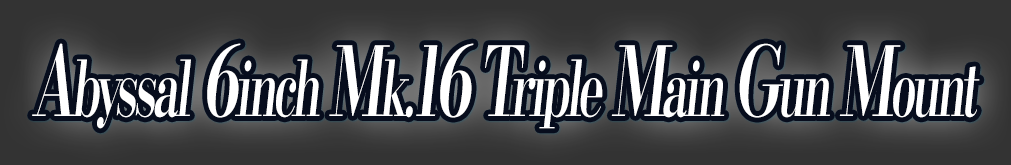
<style>
.page{position:relative;width:1011px;height:165px}
.page>*{position:absolute;margin:0}
.t1{font:76.8px "KochoStd-Heavy";letter-spacing:-0.08em;color:#ffffff;font-style:italic;scale:0.61 1}
.t2{font:96px "KochoStd-Heavy";letter-spacing:-0.08em;color:#ffffff;font-style:italic;scale:0.61 1}
</style>
<div class="page">
<p class="t1" style="left:32px;top:43px;width:948px;height:86px"><span class="t2">A</span>byssal<span class="t2"> 6</span>inch <span class="t2">M</span>k.<span class="t2">16 T</span>riple <span class="t2">M</span>ain <span class="t2">G</span>un <span class="t2">M</span>ount</p>
</div>
